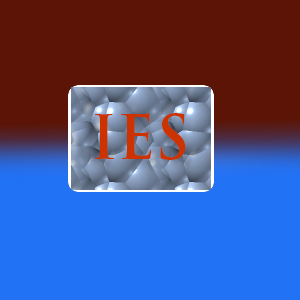
<style>
.page{position:relative;width:300px;height:300px;background:#2272f6}
.page>*{position:absolute;margin:0}
.t1{font:60px "TrajanPro-Bold";color:#cc3300}
</style>
<div class="page">
<p class="t1" style="left:94px;top:113px;width:92px;height:47px">IES</p>
</div>
